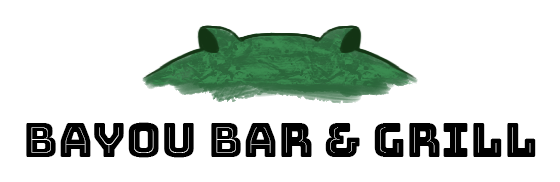
<style>
.page{position:relative;width:560px;height:182px;background:#ffffff}
.page>*{position:absolute;margin:0}
.t1{font:48px "BungeeInline-Regular";color:#000000}
</style>
<div class="page">
<p class="t1" style="left:26px;top:122px;width:510px;height:36px">BAYOU BAR &amp; GRILL</p>
</div>
